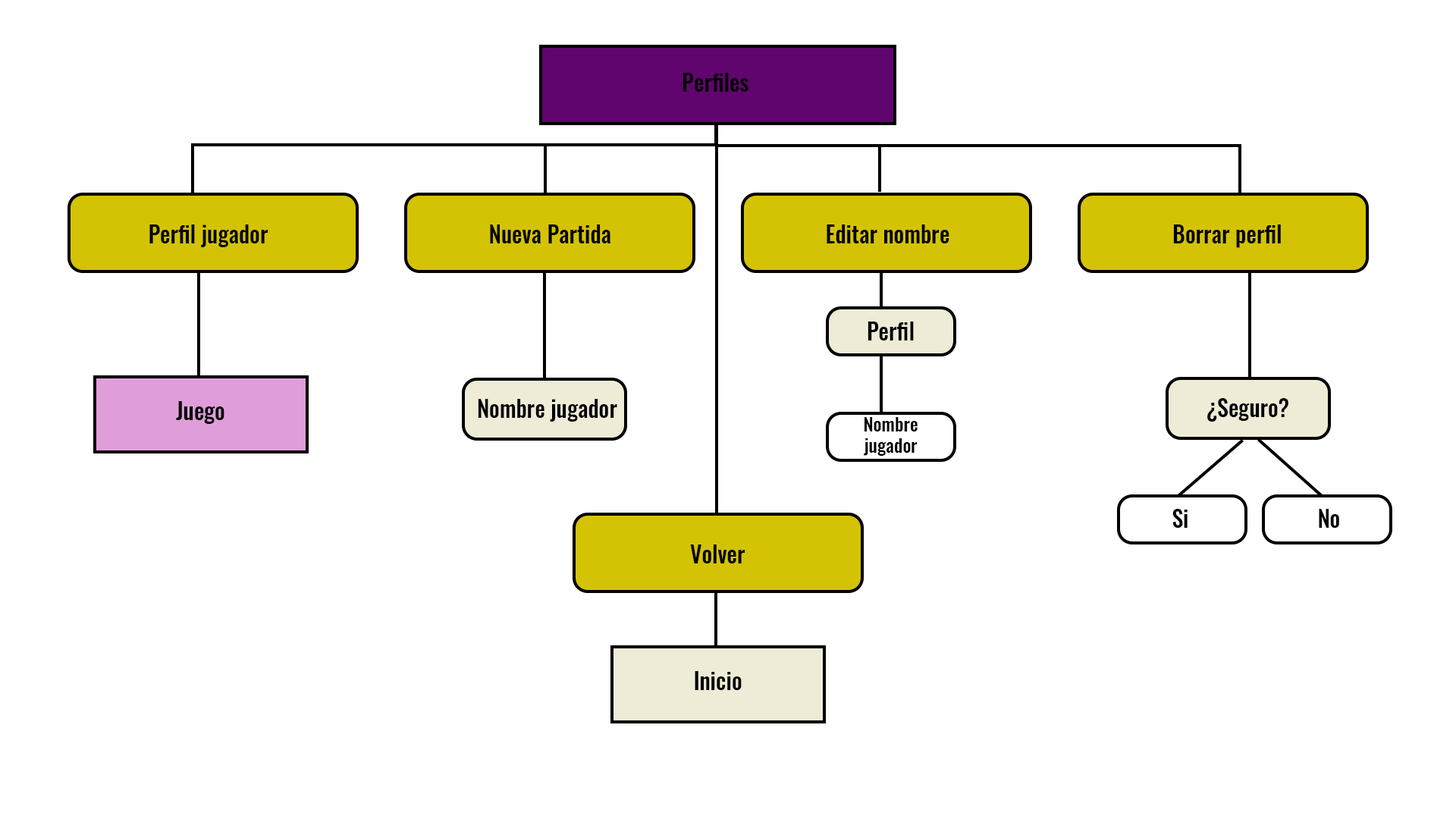
<style>
.page{position:relative;width:1456px;height:819px;background:#ffffff}
.page>*{position:absolute;margin:0}
.t1{font:22.7px "Oswald-Medium";color:#000000}
.t2{font:18.2px "Oswald-Medium";color:#000000}
</style>
<div class="page">
<p class="t1" style="left:682px;top:73px;width:66px;height:19px">Perfiles</p>
<p class="t1" style="left:149px;top:224px;width:119px;height:23px">Perfil jugador</p>
<p class="t1" style="left:490px;top:224px;width:120px;height:19px">Nueva Partida</p>
<p class="t1" style="left:827px;top:224px;width:122px;height:19px">Editar nombre</p>
<p class="t1" style="left:1173px;top:224px;width:108px;height:24px">Borrar perfil</p>
<p class="t1" style="left:868px;top:322px;width:46px;height:18px">Perfil</p>
<p class="t1" style="left:176px;top:401px;width:48px;height:23px">Juego</p>
<p class="t1" style="left:478px;top:399px;width:139px;height:23px">Nombre jugador</p>
<p class="t1" style="left:1207px;top:398px;width:81px;height:24px">¿Seguro?</p>
<p class="t2" style="left:864px;top:417px;width:54px;height:39px;text-align:center">Nombre <br>jugador</p>
<p class="t1" style="left:1172px;top:509px;width:16px;height:19px">Si</p>
<p class="t1" style="left:1319px;top:509px;width:20px;height:19px">No</p>
<p class="t1" style="left:690px;top:544px;width:55px;height:19px">Volver</p>
<p class="t1" style="left:695px;top:671px;width:47px;height:19px">Inicio</p>
</div>
